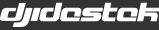
<style>
.page{position:relative;width:159px;height:30px;background:#333333}
.page>*{position:absolute;margin:0}
.t1{font:32px "Blaster-Italic";letter-spacing:-0.04em;color:#ffffff}
</style>
<div class="page">
<p class="t1" style="left:39px;top:2px;width:121px;height:20px">destek</p>
</div>
